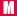
<style>
.page{position:relative;width:17px;height:16px;background:#d9083c}
.page>*{position:absolute;margin:0}
.t1{font:16px "Impact";color:#ffffff}
</style>
<div class="page">
<p class="t1" style="left:3px;top:1px;width:11px;height:13px">M</p>
</div>
